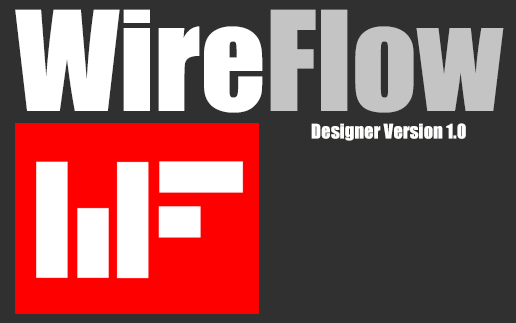
<style>
.page{position:relative;width:516px;height:323px;background:#303030}
.page>*{position:absolute;margin:0}
.t1{font:128px "Impact";color:#ffffff}
.t2{font:128px "Impact";color:#c4c4c4}
.t3{font:18.7px "Impact";color:#fffffe}
</style>
<div class="page">
<p class="t1" style="left:15px;top:9px;width:489px;height:104px">Wire<span class="t2">Flow</span></p>
<p class="t3" style="left:311px;top:123px;width:155px;height:18px">Designer Version 1.0</p>
</div>
